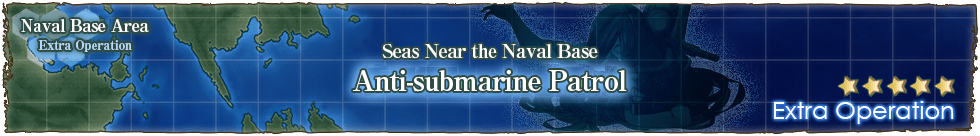
<style>
.page{position:relative;width:980px;height:136px}
.page>*{position:absolute;margin:0}
.t1{font:17px/22px "RyuminPro-ExBold";letter-spacing:-0.04em;color:#ffffff}
.t2{font:13px/22px "RyuminPro-ExBold";letter-spacing:-0.04em;color:#b9d7f5}
.t3{font:19px "RyuminPro-ExBold";letter-spacing:-0.04em;color:#ffffff}
.t4{font:28px "RyuminPro-ExBold";letter-spacing:-0.04em;color:#ffffff}
</style>
<div class="page">
<p class="t1" style="left:21px;top:19px;width:128px;height:33px">Naval Base Area<br>　　　<span class="t2">Extra Operation</span></p>
<p class="t3" style="left:382px;top:43px;width:216px;height:16px">Seas Near the Naval Base</p>
<p class="t4" style="left:353px;top:70px;width:274px;height:22px">Anti-submarine Patrol</p>
</div>
